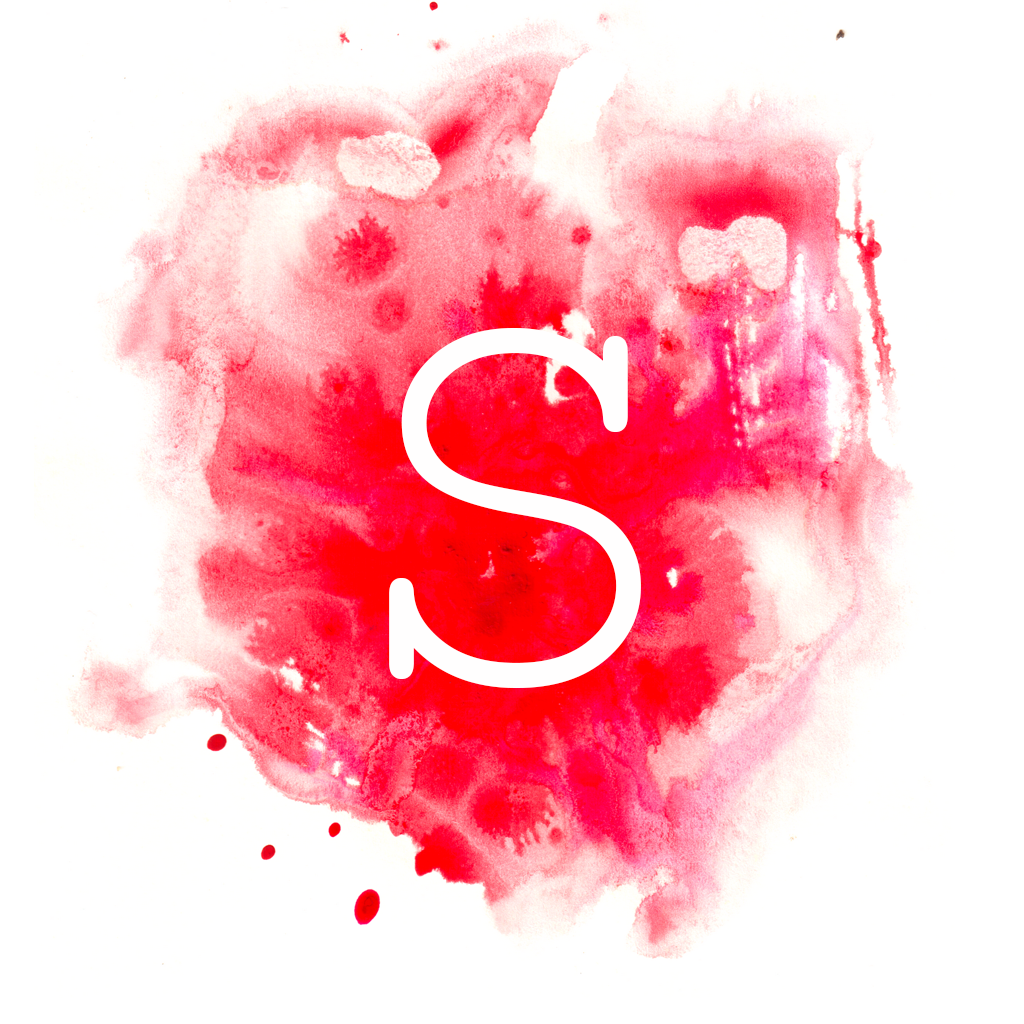
<style>
.page{position:relative;width:1024px;height:1024px;background:#ffffff}
.page>*{position:absolute;margin:0}
.t1{font:599.9px "CourierNewPSMT";letter-spacing:0.1em;color:#fffefe}
</style>
<div class="page">
<p class="t1" style="left:389px;top:328px;width:252px;height:360px">S</p>
</div>
